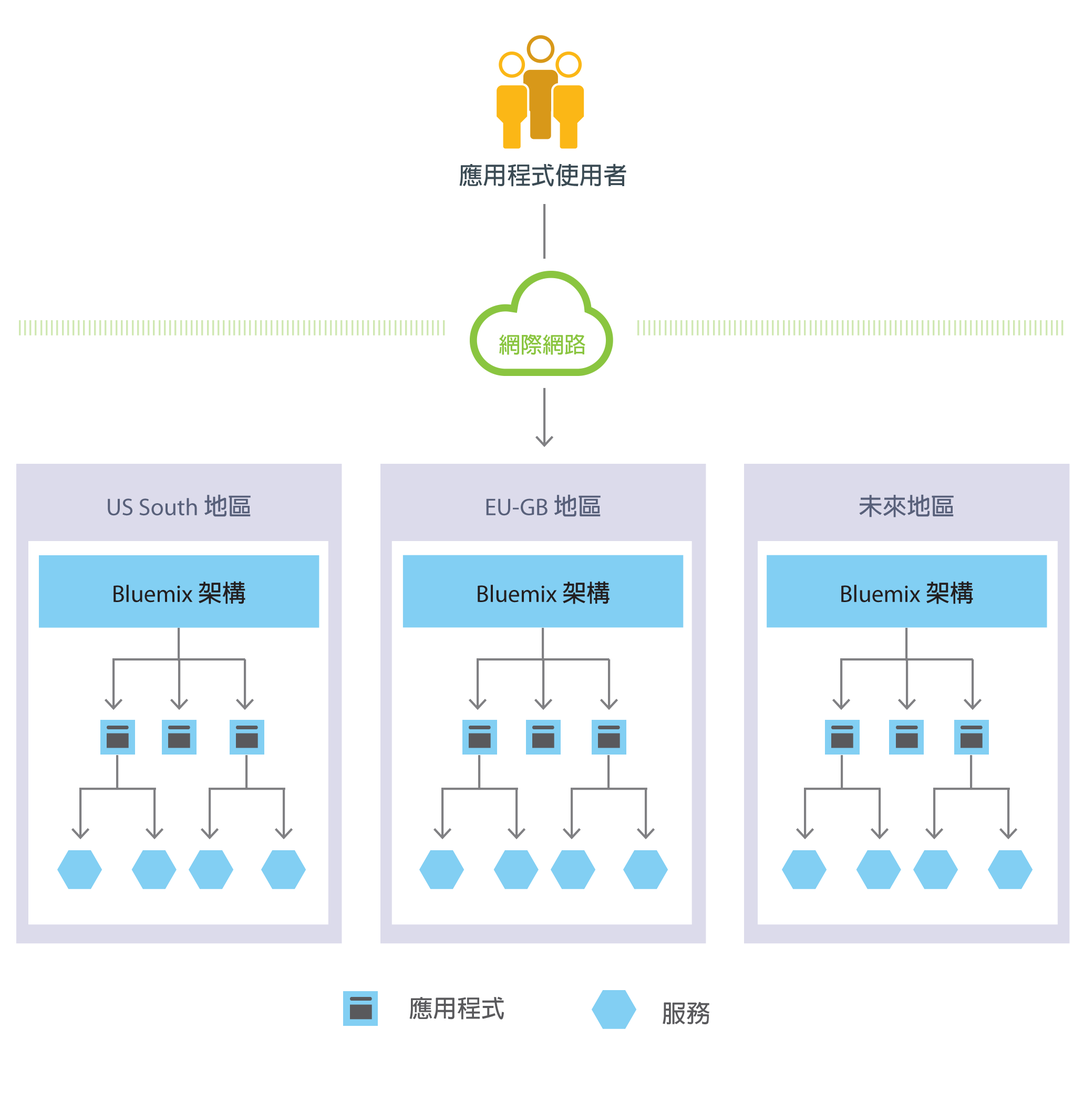
<style>
.page{position:relative;width:1084px;height:1100px;background:#ffffff}
.page>*{position:absolute;margin:0}
.t1{font:24.1px "AdobeFanHeitiStd-Bold";color:#3b4b54}
.t2{font:21.9px "AdobeFanHeitiStd-Bold";color:#8ac540}
.t3{font:24.1px "MyriadPro-Regular";color:#58607a}
.t4{font:24.1px "AdobeFanHeitiStd-Bold";color:#58607a}
.t5{font:24.1px "MyriadPro-Regular";color:#231f20}
.t6{font:24.1px "AdobeFanHeitiStd-Bold";color:#231f20}
.t7{font:24.1px "AdobeFanHeitiStd-Bold";color:#59595c}
</style>
<div class="page">
<p class="t1" style="left:459px;top:163px;width:168px;height:24px">應用程式使用者</p>
<p class="t2" style="left:499px;top:334px;width:87px;height:21px">網際網路</p>
<p class="t3" style="left:108px;top:494px;width:143px;height:23px">US South <span class="t4">地區</span></p>
<p class="t3" style="left:486px;top:494px;width:115px;height:23px">EU-GB <span class="t4">地區</span></p>
<p class="t4" style="left:859px;top:494px;width:95px;height:23px">未來地區</p>
<p class="t5" style="left:114px;top:581px;width:131px;height:23px">Bluemix <span class="t6">架構</span></p>
<p class="t5" style="left:478px;top:581px;width:132px;height:23px">Bluemix <span class="t6">架構</span></p>
<p class="t5" style="left:842px;top:581px;width:131px;height:23px">Bluemix <span class="t6">架構</span></p>
<p class="t7" style="left:409px;top:996px;width:95px;height:23px">應用程式</p>
<p class="t7" style="left:663px;top:1001px;width:47px;height:23px">服務</p>
</div>
